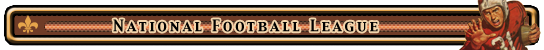
<style>
.page{position:relative;width:544px;height:50px}
.page>*{position:absolute;margin:0}
.t1{font:14px "CapitalsRegular";letter-spacing:0.2em;color:#000000}
</style>
<div class="page">
<p class="t1" style="left:113px;top:19px;width:265px;height:13px">National Football League</p>
</div>
